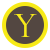
<style>
.page{position:relative;width:50px;height:50px;background:#534741}
.page>*{position:absolute;margin:0}
.t1{font:32.1px "PerpetuaTitlingMT-Light";color:#f7ea17}
</style>
<div class="page">
<p class="t1" style="left:14px;top:14px;width:23px;height:23px">Y</p>
</div>
